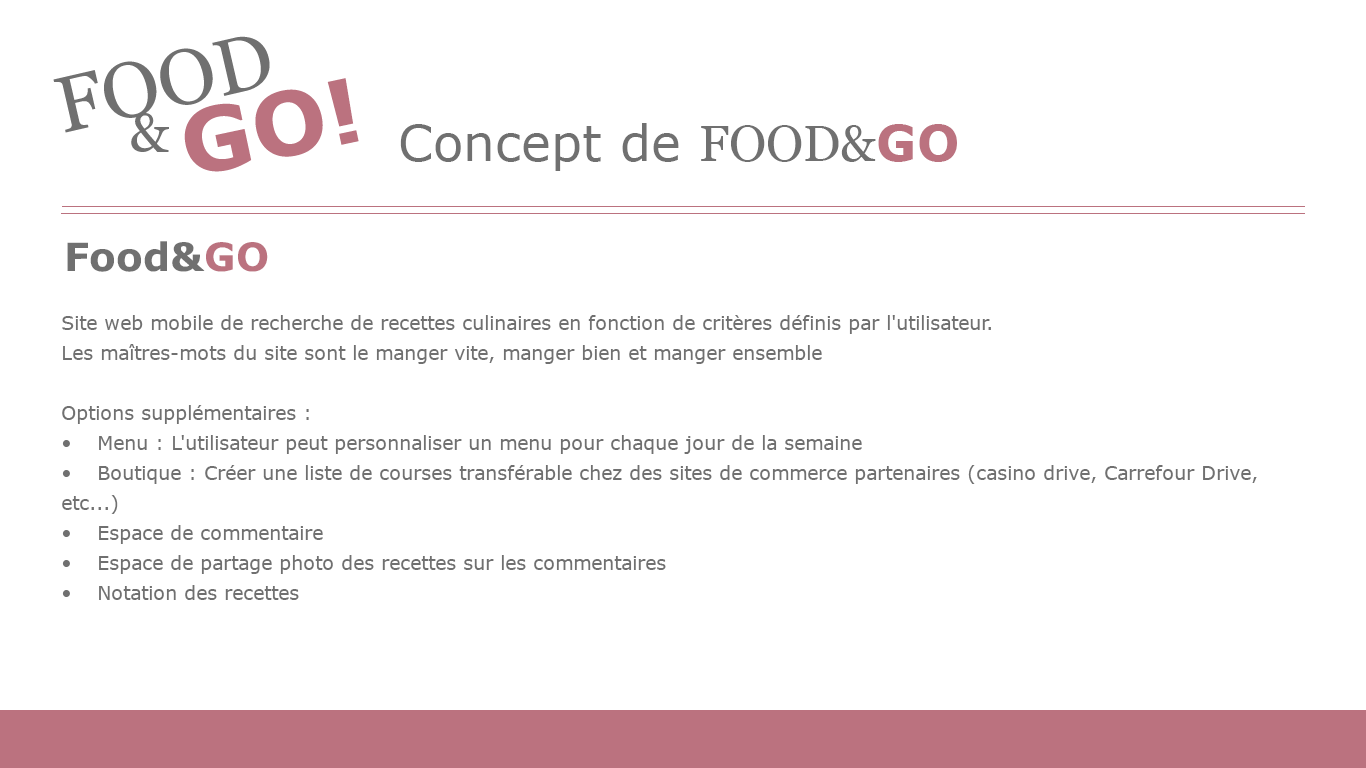
<style>
.page{position:relative;width:1366px;height:768px;background:#ffffff}
.page>*{position:absolute;margin:0}
.t1{font:50px "Verdana";color:#707070}
.t2{font:50px "Georgia";color:#707070}
.t3{font:50px "Verdana-Bold";color:#bb727f}
.t4{font:39px "Verdana-Bold";color:#707070}
.t5{font:39px "Verdana-Bold";color:#bb727f}
.t6{font:19px/30px "Verdana";color:#707070}
</style>
<div class="page">
<p class="t1" style="left:400px;top:123px;width:557px;height:48px">Concept de <span class="t2">FOOD&amp;</span><span class="t3">GO</span></p>
<p class="t4" style="left:67px;top:241px;width:201px;height:31px">Food&amp;<span class="t5">GO</span></p>
<p class="t6" style="left:62px;top:315px;width:1195px;height:285px">Site web mobile de recherche de recettes culinaires en fonction de critères définis par l'utilisateur.<br>Les maîtres-mots du site sont le manger vite, manger bien et manger ensemble<br><br>Options supplémentaires :<br>• Menu : L'utilisateur peut personnaliser un menu pour chaque jour de la semaine <br>• Boutique : Créer une liste de courses transférable chez des sites de commerce partenaires (casino drive, Carrefour Drive, etc...)<br>• Espace de commentaire<br>• Espace de partage photo des recettes sur les commentaires<br>• Notation des recettes</p>
</div>
